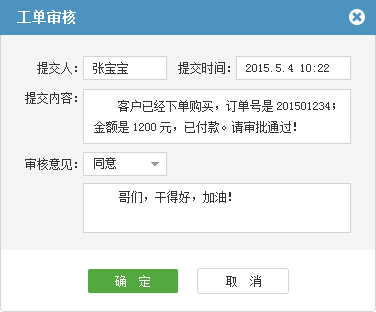
<style>
.page{position:relative;width:376px;height:312px;background:#ffffff}
.page>*{position:absolute;margin:0}
.t1{font:14px "SimSun";color:#ffffff;font-weight:bold}
.t2{font:12px "SimSun";color:#333333}
.t3{font:12px "SimSun";color:#ffffff}
</style>
<div class="page">
<p class="t1" style="left:17px;top:10px;width:59px;height:14px">工单审核</p>
<p class="t2" style="left:37px;top:62px;width:40px;height:12px">提交人：</p>
<p class="t2" style="left:93px;top:62px;width:35px;height:12px">张宝宝</p>
<p class="t2" style="left:178px;top:62px;width:52px;height:12px">提交时间：</p>
<p class="t2" style="left:246px;top:64px;width:83px;height:8px">2015.5.4 10:22</p>
<p class="t2" style="left:25px;top:92px;width:52px;height:12px">提交内容：</p>
<p class="t2" style="left:94px;top:100px;width:241px;height:33px">客户已经下单购买，订单号是201501234；金额是1200元，已付款。请审批通过！</p>
<p class="t2" style="left:25px;top:158px;width:52px;height:12px">审核意见：</p>
<p class="t2" style="left:94px;top:157px;width:22px;height:12px">同意</p>
<p class="t2" style="left:119px;top:191px;width:112px;height:12px">哥们，干得好，加油！</p>
<p class="t3" style="left:115px;top:275px;width:35px;height:12px">确  定</p>
<p class="t2" style="left:226px;top:275px;width:35px;height:12px">取  消</p>
</div>
